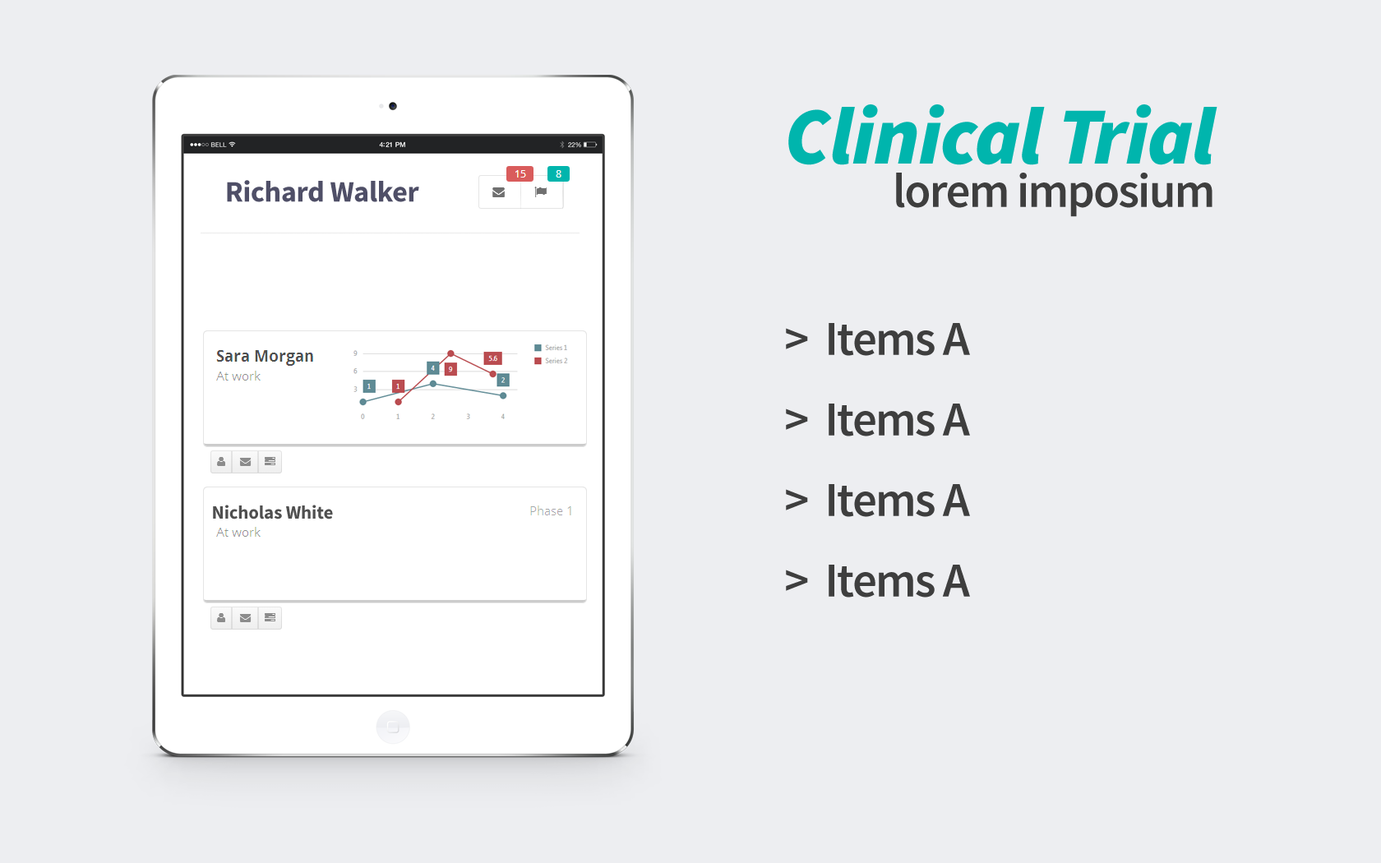
<style>
.page{position:relative;width:1381px;height:863px;background:#edeef1}
.page>*{position:absolute;margin:0}
.t1{font:81.4px "SourceSansPro-BlackIt";letter-spacing:-0.01em;color:#00b5ad}
.t2{font:48.5px "SourceSansPro-Semibold";letter-spacing:-0.03em;color:#3e3e3e}
.t3{font:29.6px "SourceSansPro-Bold";letter-spacing:-0.01em;color:#4f4f67}
.t4{font:48.5px/40.3px "SourceSansPro-Semibold";letter-spacing:-0.03em;color:#3e3e3e}
.t5{font:18.9px "SourceSansPro-Bold";letter-spacing:-0.01em;color:#4f4f4f}
</style>
<div class="page">
<p class="t1" style="left:788px;top:104px;width:430px;height:61px">Clinical Trial</p>
<p class="t2" style="left:896px;top:173px;width:317px;height:44px">lorem imposium</p>
<p class="t3" style="left:227px;top:180px;width:192px;height:22px">Richard Walker</p>
<p class="t4" style="left:786px;top:323px;width:184px;height:275px">&gt;  Items A<br><br>&gt;  Items A<br><br>&gt;  Items A<br><br>&gt;  Items A</p>
<p class="t5" style="left:213px;top:505px;width:120px;height:15px">Nicholas White</p>
</div>
